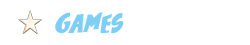
<style>
.page{position:relative;width:250px;height:45px;background:#ffffff}
.page>*{position:absolute;margin:0}
.t1{font:30px "HoustonComicsPersonalUse";color:#7ecef6}
</style>
<div class="page">
<p class="t1" style="left:55px;top:12px;width:69px;height:22px">GAMES</p>
</div>
